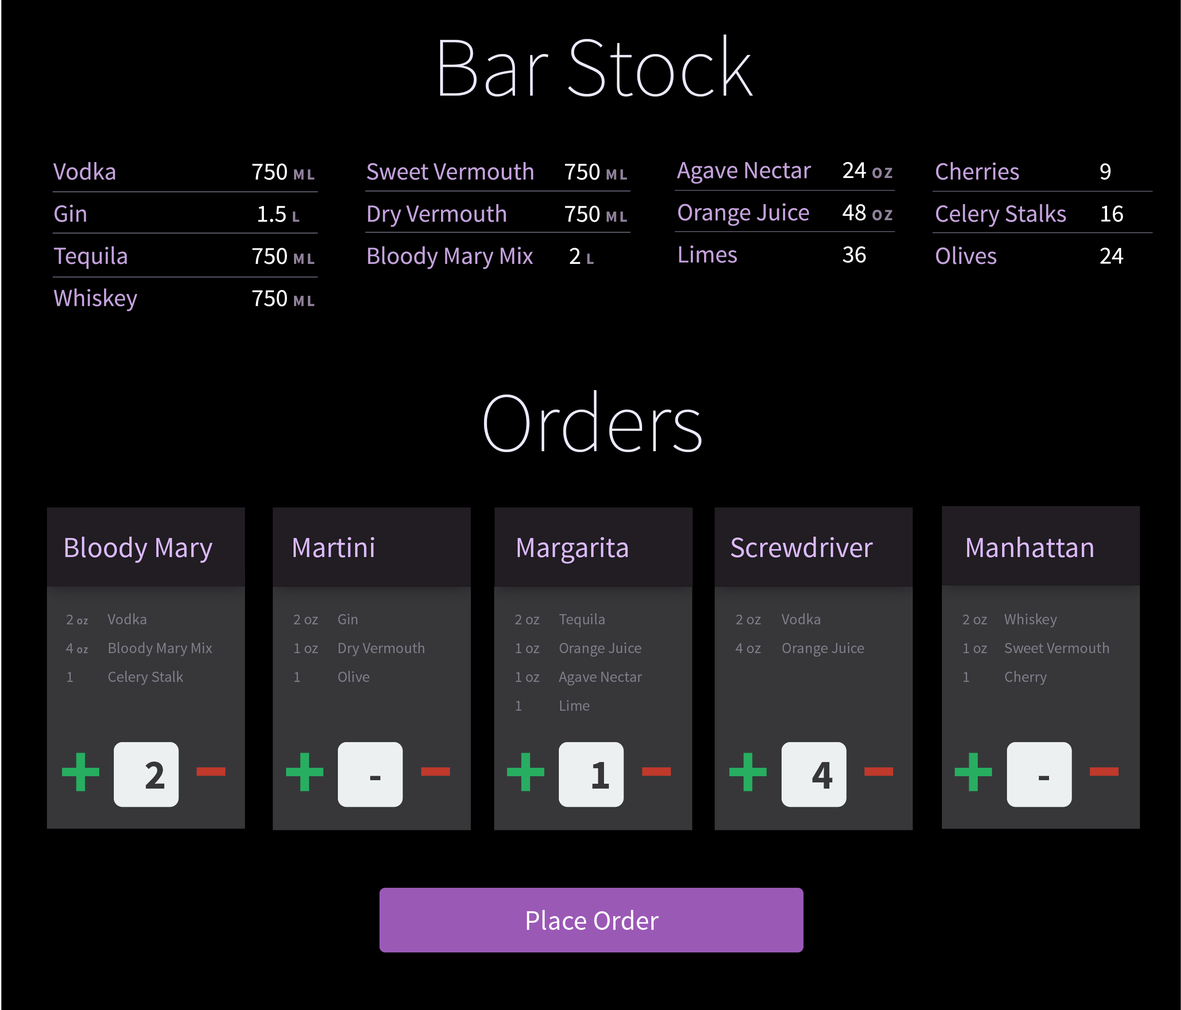
<style>
.page{position:relative;width:1181px;height:1010px;background:#000000}
.page>*{position:absolute;margin:0}
.t1{font:84.9px "SourceSansPro-ExtraLight";color:#ece8fc}
.t2{font:28.7px "SourceSansPro-Regular";color:#dbb9f9}
.t3{font:8.4px/28.7px "SourceSansPro-Bold";letter-spacing:0.135em;color:#807d89;text-transform:uppercase}
.t4{font:15.3px/28.7px "SourceSansPro-Regular";color:#807d89}
.t5{font:80.8px "SourceSansPro-Bold";letter-spacing:0.05em;color:#27ae60}
.t6{font:41.3px "SourceSansPro-Bold";letter-spacing:0.05em;color:#37373a}
.t7{font:80.8px "SourceSansPro-Bold";letter-spacing:0.05em;color:#c0392b;scale:1.44 1}
.t8{font:27.6px "SourceSansPro-Regular";color:#ffffff}
</style>
<div class="page">
<p class="t1" style="left:440px;top:35px;width:313px;height:62px">Bar Stock</p>
<p class="t1" style="left:484px;top:390px;width:217px;height:62px">Orders</p>
<p class="t2" style="left:65px;top:537px;width:148px;height:26px">Bloody Mary</p>
<p class="t2" style="left:294px;top:537px;width:80px;height:20px">Martini</p>
<p class="t2" style="left:518px;top:537px;width:110px;height:27px">Margarita</p>
<p class="t2" style="left:731px;top:537px;width:142px;height:20px">Screwdriver</p>
<p class="t2" style="left:967px;top:537px;width:126px;height:20px">Manhattan</p>
<p class="t3" style="left:66px;top:615px;width:22px;height:67px"><span class="t4">2 </span>oz <br><span class="t4">4 </span>oz<br><span class="t4">1</span></p>
<p class="t4" style="left:108px;top:613px;width:104px;height:72px">Vodka<br>Bloody Mary Mix<br>Celery Stalk</p>
<p class="t4" style="left:294px;top:615px;width:24px;height:67px">2 oz <br>1 oz<br>1</p>
<p class="t4" style="left:338px;top:614px;width:86px;height:68px">Gin<br>Dry Vermouth<br>Olive</p>
<p class="t4" style="left:515px;top:615px;width:24px;height:96px">2 oz <br>1 oz<br>1 oz<br>1</p>
<p class="t4" style="left:559px;top:613px;width:83px;height:98px">Tequila<br>Orange Juice<br>Agave Nectar<br>Lime</p>
<p class="t4" style="left:735px;top:615px;width:26px;height:38px">2 oz <br>4 oz</p>
<p class="t4" style="left:781px;top:613px;width:83px;height:44px">Vodka<br>Orange Juice</p>
<p class="t4" style="left:963px;top:615px;width:24px;height:67px">2 oz <br>1 oz<br>1</p>
<p class="t4" style="left:1004px;top:613px;width:105px;height:72px">Whiskey<br>Sweet Vermouth<br>Cherry</p>
<p class="t5" style="left:62px;top:753px;width:38px;height:38px">+</p>
<p class="t6" style="left:145px;top:762px;width:19px;height:27px">2</p>
<p class="t5" style="left:286px;top:753px;width:38px;height:38px">+</p>
<p class="t5" style="left:507px;top:753px;width:38px;height:38px">+</p>
<p class="t6" style="left:592px;top:762px;width:17px;height:27px">1</p>
<p class="t5" style="left:729px;top:753px;width:38px;height:38px">+</p>
<p class="t6" style="left:812px;top:762px;width:20px;height:27px">4</p>
<p class="t5" style="left:955px;top:753px;width:37px;height:38px">+</p>
<p class="t7" style="left:197px;top:767px;width:28px;height:9px">-</p>
<p class="t7" style="left:421px;top:767px;width:29px;height:9px">-</p>
<p class="t7" style="left:642px;top:767px;width:29px;height:9px">-</p>
<p class="t7" style="left:864px;top:767px;width:29px;height:9px">-</p>
<p class="t7" style="left:1090px;top:767px;width:28px;height:9px">-</p>
<p class="t6" style="left:370px;top:776px;width:10px;height:4px">-</p>
<p class="t6" style="left:1039px;top:776px;width:10px;height:4px">-</p>
<p class="t8" style="left:527px;top:910px;width:132px;height:20px">Place Order</p>
</div>
